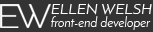
<style>
.page{position:relative;width:153px;height:32px;background:#333333}
.page>*{position:absolute;margin:0}
.t1{font:15px "JosefinSans";color:#ffffff}
.t2{font:13px "JosefinSans";color:#ffffff}
</style>
<div class="page">
<p class="t1" style="left:51px;top:3px;width:101px;height:12px">ELLEN WELSH</p>
<p class="t2" style="left:51px;top:16px;width:100px;height:14px">front-end developer</p>
</div>
